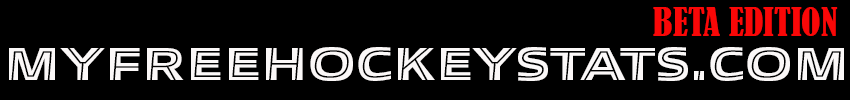
<style>
.page{position:relative;width:850px;height:100px;background:#000000}
.page>*{position:absolute;margin:0}
.t1{font:36px "BernardMT-Condensed";color:#fa0707}
.t2{font:46px "AllumiStdExtendedInline-Black24A";color:#fbf8f8}
</style>
<div class="page">
<p class="t1" style="left:653px;top:7px;width:185px;height:29px">BETA EDITION</p>
<p class="t2" style="left:9px;top:47px;width:835px;height:34px">MyFreeHockeystats.com</p>
</div>
